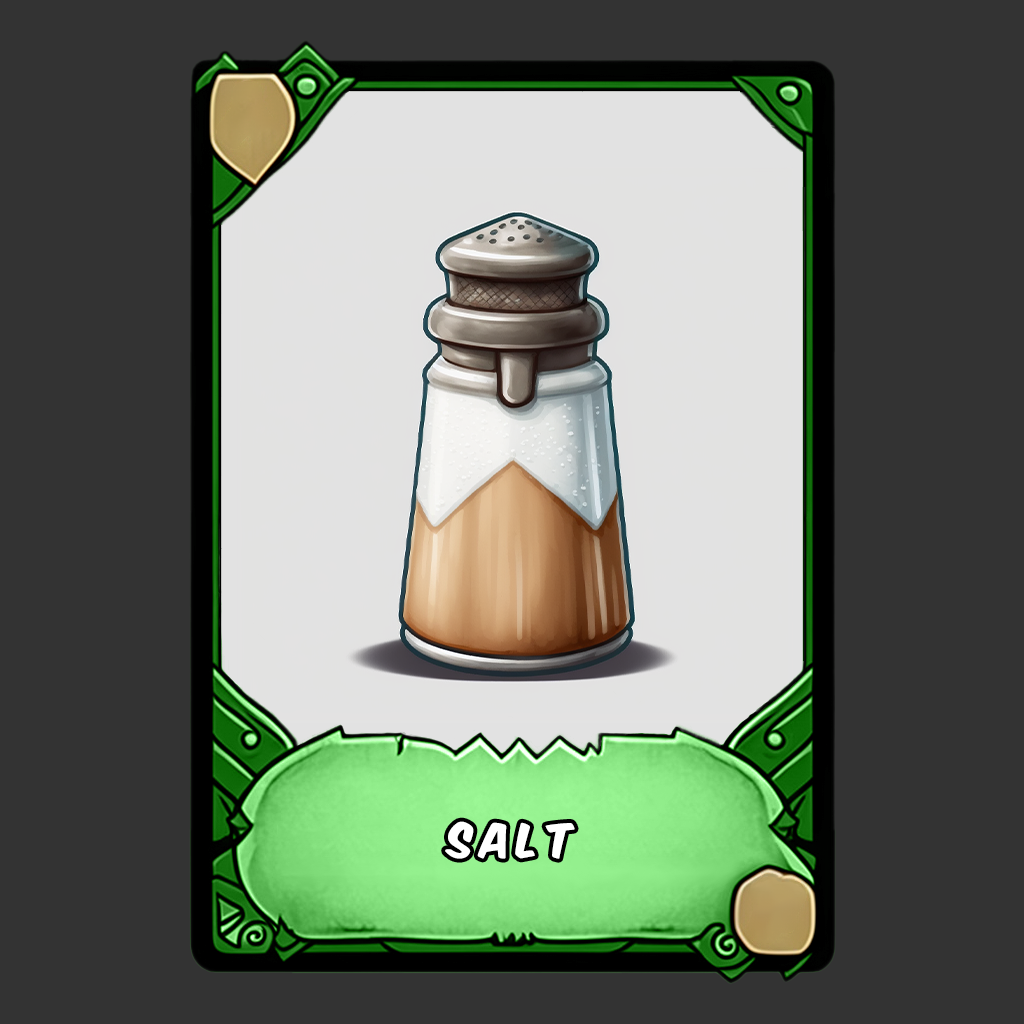
<style>
.page{position:relative;width:1024px;height:1024px;background:#333333}
.page>*{position:absolute;margin:0}
.t1{font:40px "KomikaAxis";letter-spacing:0.2em;color:#ffffff}
</style>
<div class="page">
<p class="t1" style="left:445px;top:821px;width:130px;height:38px">salt</p>
</div>
